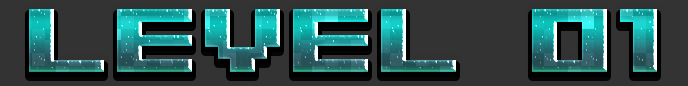
<style>
.page{position:relative;width:688px;height:86px;background:#333333}
.page>*{position:absolute;margin:0}
.t1{font:100px "04b09";text-transform:uppercase}
</style>
<div class="page">
<p class="t1" style="left:29px;top:9px;width:628px;height:63px">LEVEL 01</p>
</div>
